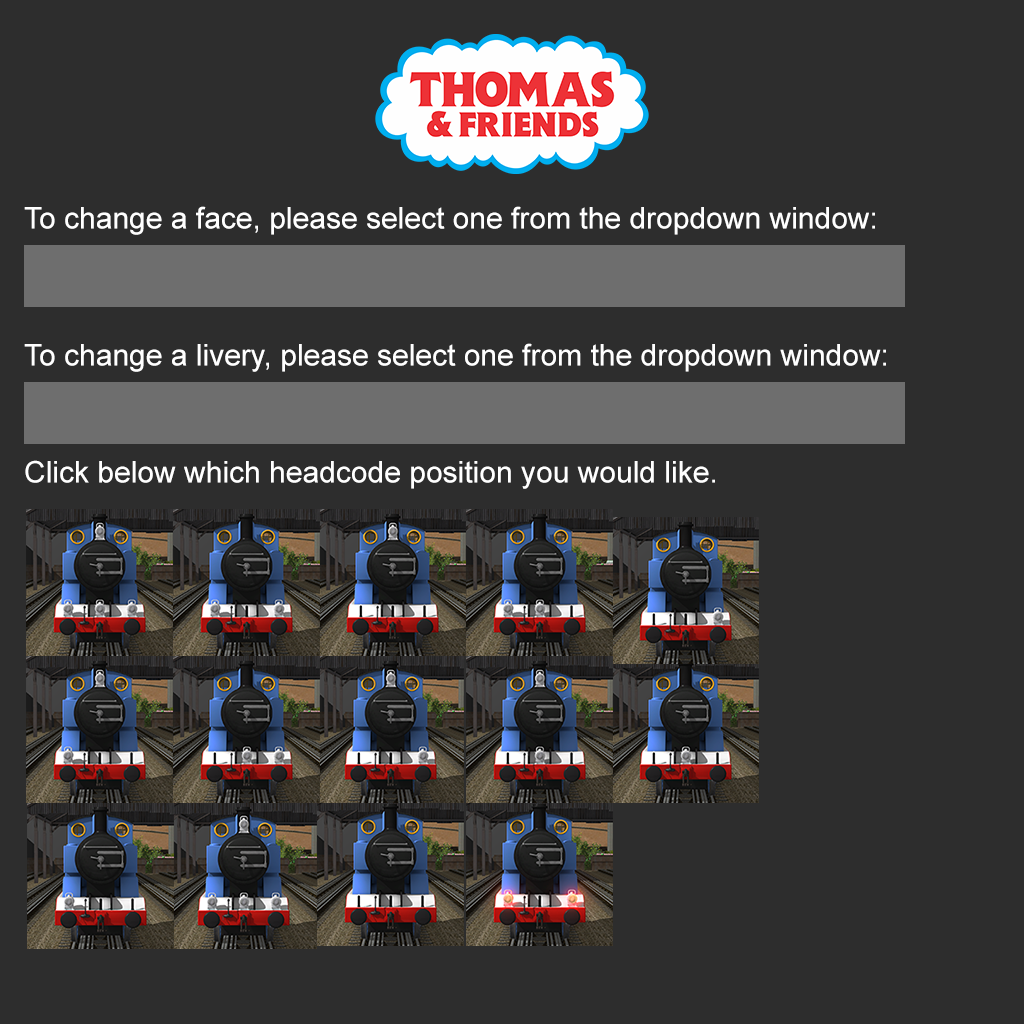
<style>
.page{position:relative;width:1024px;height:1024px;background:#2d2d2d}
.page>*{position:absolute;margin:0}
.t1{font:30px "ArialMT";color:#ffffff}
</style>
<div class="page">
<p class="t1" style="left:24px;top:206px;width:851px;height:29px">To change a face, please select one from the dropdown window:</p>
<p class="t1" style="left:24px;top:343px;width:862px;height:29px">To change a livery, please select one from the dropdown window:</p>
<p class="t1" style="left:25px;top:460px;width:690px;height:29px">Click below which headcode position you would like.</p>
</div>
